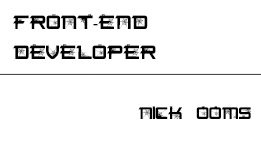
<style>
.page{position:relative;width:261px;height:147px;background:#ffffff}
.page>*{position:absolute;margin:0}
.t1{font:16px/30px "SPIDERfont-Regular";color:#000000}
.t2{font:16px/30px "MyriadPro-Regular";color:#000000}
.t3{font:14px "SPIDERfont-Regular";color:#000000}
</style>
<div class="page">
<p class="t1" style="left:13px;top:14px;width:143px;height:45px">front<span class="t2">-</span>End <br>developer</p>
<p class="t3" style="left:138px;top:106px;width:114px;height:13px">Nick Ooms</p>
</div>
